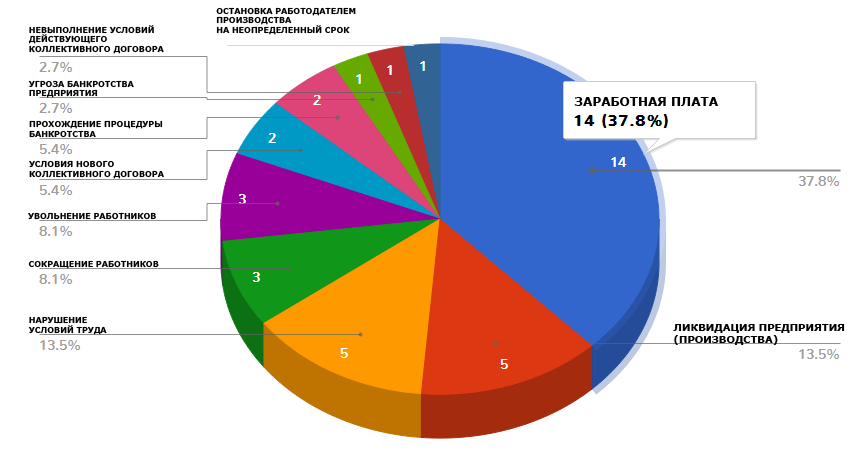
<style>
.page{position:relative;width:867px;height:452px;background:#ffffff}
.page>*{position:absolute;margin:0}
.t1{font:8px "Verdana-Bold";color:#000000}
.t2{font:12px "Verdana-Bold";color:#000000}
.t3{font:10px "Verdana-Bold";color:#000000}
</style>
<div class="page">
<p class="t1" style="left:28px;top:25px;width:136px;height:29px">НЕВЫПОЛНЕНИЕ УСЛОВИЙ<br>ДЕЙСТВУЮЩЕГО<br>КОЛЛЕКТИВНОГО ДОГОВОРА</p>
<p class="t1" style="left:28px;top:80px;width:106px;height:18px">УГРОЗА БАНКРОТСТВА <br>ПРЕДПРИЯТИЯ</p>
<p class="t2" style="left:574px;top:97px;width:144px;height:9px">ЗАРАБОТНАЯ ПЛАТА</p>
<p class="t1" style="left:29px;top:120px;width:134px;height:18px">ПРОХОЖДЕНИЕ ПРОЦЕДУРЫ<br>БАНКРОТСТВА</p>
<p class="t1" style="left:29px;top:160px;width:135px;height:19px">УСЛОВИЯ НОВОГО<br>КОЛЛЕКТИВНОГО ДОГОВОРА</p>
<p class="t1" style="left:28px;top:212px;width:128px;height:8px">УВОЛЬНЕНИЕ РАБОТНИКОВ</p>
<p class="t1" style="left:28px;top:260px;width:131px;height:9px">СОКРАЩЕНИЕ РАБОТНИКОВ</p>
<p class="t1" style="left:28px;top:316px;width:79px;height:19px">НАРУШЕНИЕ<br>УСЛОВИЙ ТРУДА</p>
<p class="t3" style="left:673px;top:324px;width:172px;height:21px">ЛИКВИДАЦИЯ ПРЕДПРИЯТИЯ<br>(ПРОИЗВОДСТВА)</p>
</div>
